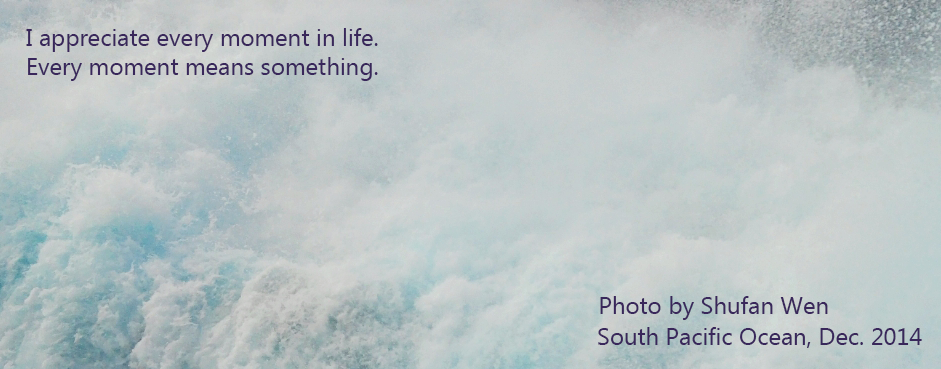
<style>
.page{position:relative;width:941px;height:369px}
.page>*{position:absolute;margin:0}
.t1{font:24px "MicrosoftTaiLe";color:#39275b}
</style>
<div class="page">
<p class="t1" style="left:26px;top:28px;width:352px;height:53px">I appreciate every moment in life. <br>Every moment means something.</p>
<p class="t1" style="left:600px;top:296px;width:228px;height:24px">Photo by Shufan Wen</p>
<p class="t1" style="left:598px;top:327px;width:324px;height:21px">South Pacific Ocean, Dec. 2014</p>
</div>
